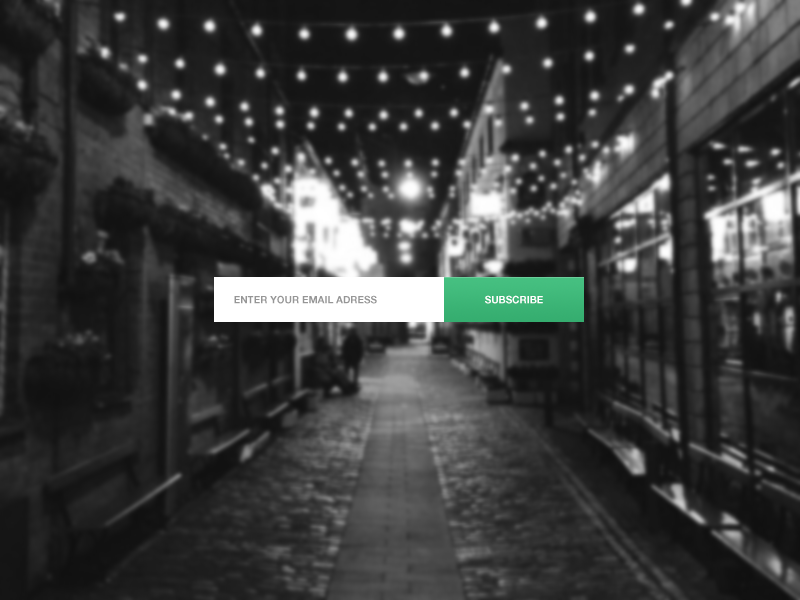
<style>
.page{position:relative;width:800px;height:600px}
.page>*{position:absolute;margin:0}
.t1{font:10px "HelveticaNeueLTStd-Bd";color:#969696}
.t2{font:10px "HelveticaNeueLTStd-Bd";color:#ffffff}
</style>
<div class="page">
<p class="t1" style="left:234px;top:295px;width:143px;height:9px">ENTER YOUR EMAIL ADRESS</p>
<p class="t2" style="left:485px;top:295px;width:58px;height:9px">SUBSCRIBE</p>
</div>
